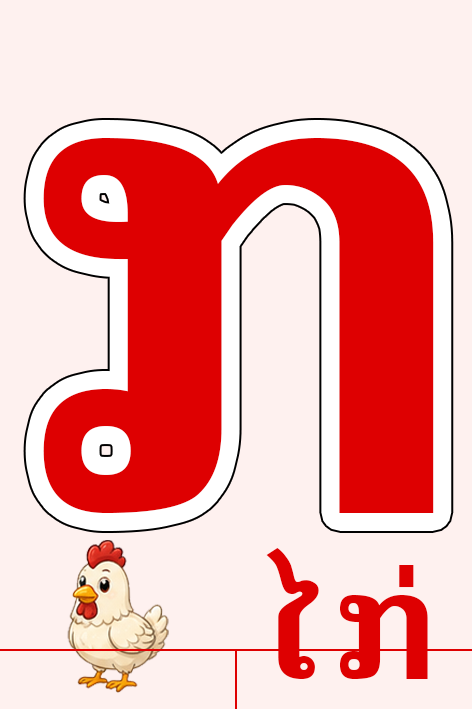
<style>
.page{position:relative;width:472px;height:709px;background:#fef1ef}
.page>*{position:absolute;margin:0}
.t1{font:666.7px "Phetsarath-Bold";letter-spacing:0.04em;color:#de0001}
.t2{font:150px "Phetsarath-Bold";letter-spacing:0.04em;color:#de0001}
</style>
<div class="page">
<p class="t1" style="left:43px;top:138px;width:391px;height:375px">ກ</p>
<p class="t2" style="left:266px;top:548px;width:162px;height:131px">ໄກ່</p>
</div>
